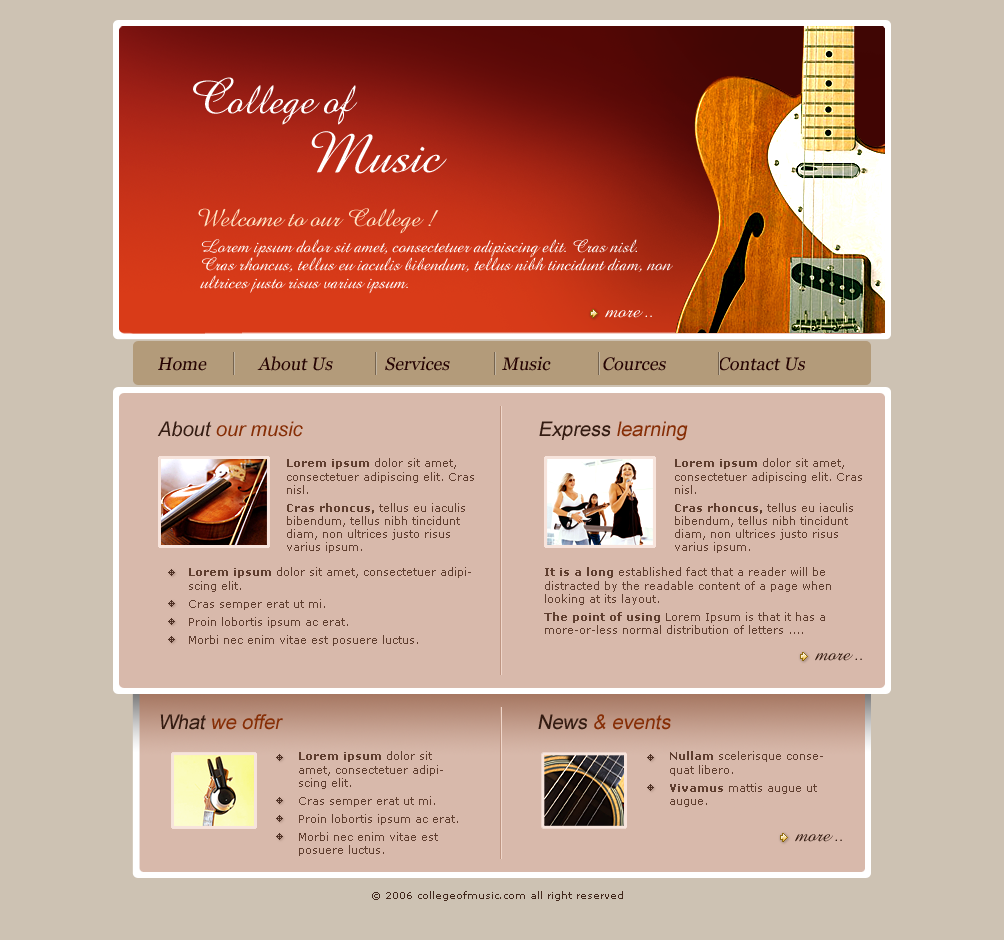
<style>
.page{position:relative;width:1004px;height:940px;background:#cdc2b3}
.page>*{position:absolute;margin:0}
.t1{font:40px "AmazoneBT-Regular";color:#ffffff;font-style:italic}
.t2{font:50px "AmazoneBT-Regular";color:#ffffff;font-style:italic}
.t3{font:60px "AmazoneBT-Regular";color:#ffffff;font-style:italic}
.t4{font:25px "AmazoneBT-Regular";color:#ffe6c6;font-style:italic}
.t5{font:18px/18px "AmazoneBT-Regular";color:#ffffff;font-style:italic}
.t6{font:20px "AmazoneBT-Regular";color:#ffffff;font-style:italic}
.t7{font:18px "Georgia";color:#260403;font-style:italic}
.t8{font:20px "Arial-ItalicMT";color:#862e06}
.t9{font:20px "Arial-ItalicMT";color:#341c12}
.t10{font:20px "ArialMT";color:#862e06;font-style:italic}
.t11{font:20px "ArialMT";color:#341c12;font-style:italic}
.t12{font:11px "Verdana";color:#5f3e2f}
.t13{font:11px "Verdana-Bold";color:#5f3e2f}
.t14{font:11px/18px "Verdana-Bold";color:#5f3e2f}
.t15{font:11px/18px "Verdana";color:#5f3e2f}
.t16{font:20px "AmazoneBT-Regular";color:#341c12;font-style:italic}
.t17{font:10px "Verdana";color:#41271b}
</style>
<div class="page">
<p class="t1" style="left:193px;top:77px;width:165px;height:48px"><span class="t2">C</span>ollege of</p>
<p class="t2" style="left:311px;top:131px;width:136px;height:43px"><span class="t3">M</span>usic</p>
<p class="t4" style="left:198px;top:208px;width:241px;height:26px">Welcome to our College !</p>
<p class="t5" style="left:200px;top:239px;width:473px;height:55px">Lorem ipsum dolor sit amet, consectetuer adipiscing elit. Cras nisl. Cras rhoncus, tellus eu iaculis bibendum, tellus nibh tincidunt diam, non ultrices justo risus varius ipsum.</p>
<p class="t6" style="left:605px;top:310px;width:47px;height:8px">more ..</p>
<p class="t7" style="left:158px;top:356px;width:647px;height:15px">Home            About Us            Services            Music            Cources            Contact Us</p>
<p class="t8" style="left:157px;top:421px;width:146px;height:16px"><span class="t9">About </span>our music</p>
<p class="t10" style="left:539px;top:421px;width:149px;height:20px"><span class="t11">Express </span>learning</p>
<p class="t12" style="left:287px;top:458px;width:187px;height:95px"><span class="t13">Lorem ipsum</span> dolor sit amet, consectetuer adipiscing elit. Cras nisl. <br><span class="t14">Cras rhoncus,</span><span class="t15"> tellus eu iaculis </span>bibendum, tellus nibh tincidunt diam, non ultrices justo risus varius ipsum.</p>
<p class="t12" style="left:675px;top:458px;width:187px;height:95px"><span class="t13">Lorem ipsum</span> dolor sit amet, consectetuer adipiscing elit. Cras nisl. <br><span class="t14">Cras rhoncus,</span><span class="t15"> tellus eu iaculis </span>bibendum, tellus nibh tincidunt diam, non ultrices justo risus varius ipsum.</p>
<p class="t15" style="left:189px;top:567px;width:282px;height:79px"><span class="t13">Lorem ipsum</span><span class="t12"> dolor sit amet, consectetuer adipiscing elit. <br></span>Cras semper erat ut mi. <br>Proin lobortis ipsum ac erat. <br>Morbi nec enim vitae est posuere luctus.</p>
<p class="t12" style="left:544px;top:567px;width:287px;height:67px"><span class="t13">It is a long</span> established fact that a reader will be distracted by the readable content of a page when looking at its layout. <br><span class="t14">The point of using</span><span class="t15"> Lorem Ipsum is that it has a </span>more-or-less normal distribution of letters ....</p>
<p class="t16" style="left:815px;top:653px;width:47px;height:8px">more ..</p>
<p class="t10" style="left:160px;top:714px;width:123px;height:16px"><span class="t11">What</span> we offer</p>
<p class="t10" style="left:538px;top:714px;width:133px;height:16px"><span class="t11">News</span> &amp; events</p>
<p class="t15" style="left:299px;top:751px;width:159px;height:105px"><span class="t13">Lorem ipsum</span><span class="t12"> dolor sit amet, consectetuer adipiscing elit. <br></span>Cras semper erat ut mi. <br>Proin lobortis ipsum ac erat. <br>Morbi nec enim vitae est <span class="t12">posuere luctus.</span></p>
<p class="t12" style="left:670px;top:751px;width:153px;height:56px"><span class="t13">Nullam</span> scelerisque consequat libero. <br><span class="t14">Vivamus</span><span class="t15"> mattis augue ut </span>augue.</p>
<p class="t16" style="left:795px;top:834px;width:47px;height:8px">more ..</p>
<p class="t17" style="left:372px;top:891px;width:251px;height:10px">© 2006 collegeofmusic.com all right reserved</p>
</div>
